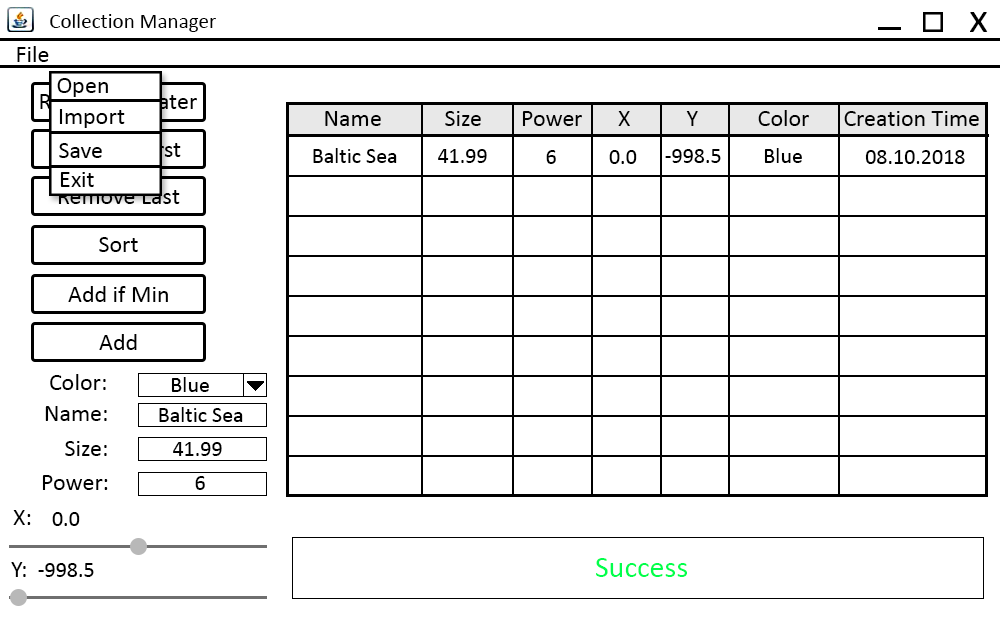
<style>
.page{position:relative;width:1000px;height:620px;background:#ffffff}
.page>*{position:absolute;margin:0}
.t1{font:21.1px "Calibri";color:#000000}
.t2{font:44.2px "Calibri";color:#000000}
.t3{font:24px "Calibri";color:#000000}
.t4{font:24px "Calibri"}
.t5{font:22px "Calibri";color:#000000}
.t6{font:30px "Calibri";color:#00ff4c}
</style>
<div class="page">
<p class="t1" style="left:50px;top:14px;width:166px;height:18px">Collection Manager</p>
<p class="t2" style="left:970px;top:12px;width:18px;height:20px">x</p>
<p class="t3" style="left:17px;top:46px;width:32px;height:16px">File</p>
<p class="t3" style="left:57px;top:78px;width:51px;height:19px">Open</p>
<p class="t4" style="left:40px;top:94px;width:157px;height:15px">Remove Greater</p>
<p class="t3" style="left:59px;top:109px;width:66px;height:19px">Import</p>
<p class="t3" style="left:325px;top:111px;width:56px;height:15px">Name</p>
<p class="t3" style="left:445px;top:111px;width:36px;height:15px">Size</p>
<p class="t3" style="left:522px;top:111px;width:60px;height:15px">Power</p>
<p class="t3" style="left:618px;top:111px;width:12px;height:15px">X</p>
<p class="t3" style="left:686px;top:111px;width:12px;height:15px">Y</p>
<p class="t3" style="left:758px;top:110px;width:51px;height:16px">Color</p>
<p class="t3" style="left:844px;top:111px;width:135px;height:15px">Creation Time</p>
<p class="t3" style="left:59px;top:143px;width:43px;height:15px">Save</p>
<p class="t5" style="left:313px;top:148px;width:84px;height:15px">Baltic Sea</p>
<p class="t5" style="left:438px;top:149px;width:49px;height:14px">41.99</p>
<p class="t5" style="left:546px;top:150px;width:10px;height:14px">6</p>
<p class="t5" style="left:609px;top:150px;width:28px;height:14px">0.0</p>
<p class="t5" style="left:665px;top:149px;width:56px;height:14px">-998.5</p>
<p class="t5" style="left:764px;top:148px;width:38px;height:15px">Blue</p>
<p class="t5" style="left:865px;top:150px;width:100px;height:14px">08.10.2018</p>
<p class="t3" style="left:60px;top:172px;width:34px;height:15px">Exit</p>
<p class="t3" style="left:58px;top:189px;width:122px;height:15px">Remove Last</p>
<p class="t3" style="left:99px;top:237px;width:39px;height:15px">Sort</p>
<p class="t3" style="left:68px;top:286px;width:100px;height:16px">Add if Min</p>
<p class="t3" style="left:99px;top:334px;width:38px;height:16px">Add</p>
<p class="t3" style="left:50px;top:374px;width:56px;height:16px">Color:</p>
<p class="t5" style="left:171px;top:377px;width:38px;height:15px">Blue</p>
<p class="t3" style="left:45px;top:406px;width:62px;height:15px">Name:</p>
<p class="t5" style="left:159px;top:407px;width:84px;height:15px">Baltic Sea</p>
<p class="t3" style="left:65px;top:441px;width:42px;height:15px">Size:</p>
<p class="t5" style="left:173px;top:442px;width:49px;height:14px">41.99</p>
<p class="t3" style="left:42px;top:475px;width:66px;height:15px">Power:</p>
<p class="t5" style="left:195px;top:476px;width:10px;height:14px">6</p>
<p class="t3" style="left:13px;top:510px;width:18px;height:15px">X:</p>
<p class="t5" style="left:52px;top:512px;width:28px;height:14px">0.0</p>
<p class="t6" style="left:596px;top:558px;width:91px;height:19px">Success</p>
<p class="t3" style="left:11px;top:562px;width:15px;height:15px">Y:</p>
<p class="t5" style="left:38px;top:563px;width:56px;height:14px">-998.5</p>
</div>
